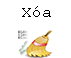
<style>
.page{position:relative;width:71px;height:58px;background:#ffffff}
.page>*{position:absolute;margin:0}
.t1{font:12px "CourierNewPSMT";color:#000000}
</style>
<div class="page">
<p class="t1" style="left:22px;top:6px;width:29px;height:11px">Xóa</p>
</div>
